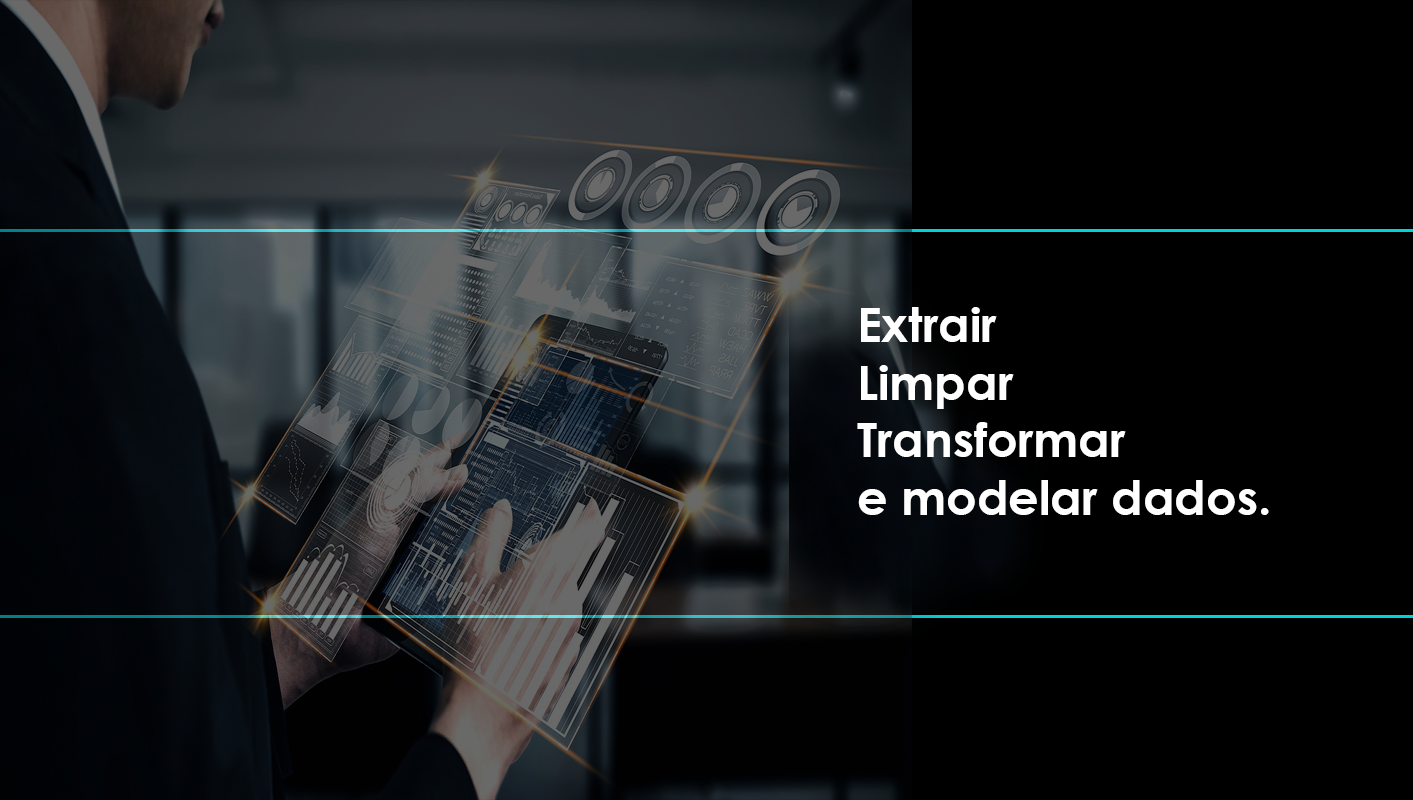
<style>
.page{position:relative;width:1413px;height:800px;background:#000000}
.page>*{position:absolute;margin:0}
.t1{font:48px "CenturyGothic-Bold";color:#ffffff}
</style>
<div class="page">
<p class="t1" style="left:857px;top:307px;width:412px;height:208px">Extrair<br>Limpar<br>Transformar<br>e modelar dados.</p>
</div>
